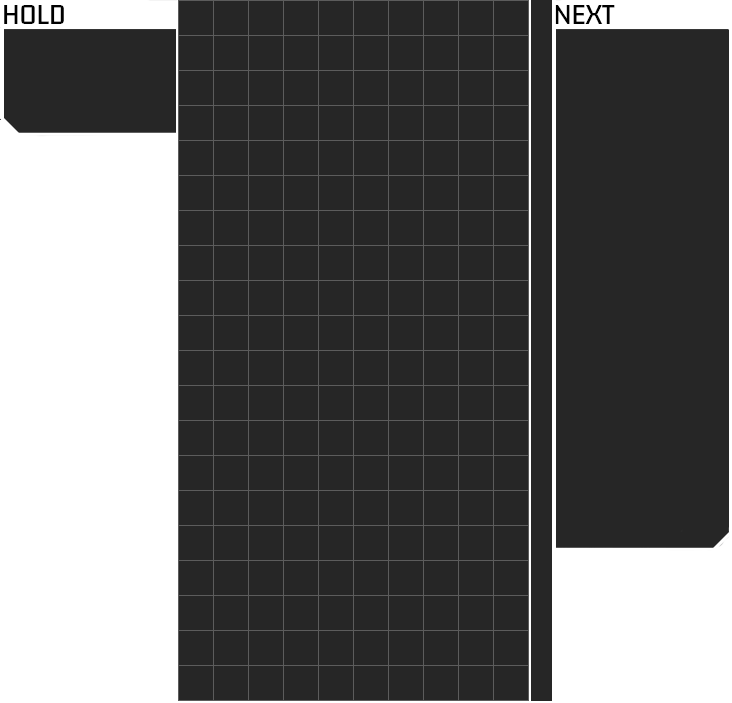
<style>
.page{position:relative;width:732px;height:703px;background:#262626}
.page>*{position:absolute;margin:0}
.t1{font:24px "KdamThmorPro-Regular";color:#000000}
</style>
<div class="page">
<p class="t1" style="left:4px;top:5px;width:60px;height:19px">HOLD</p>
<p class="t1" style="left:555px;top:5px;width:60px;height:19px">NEXT</p>
</div>
